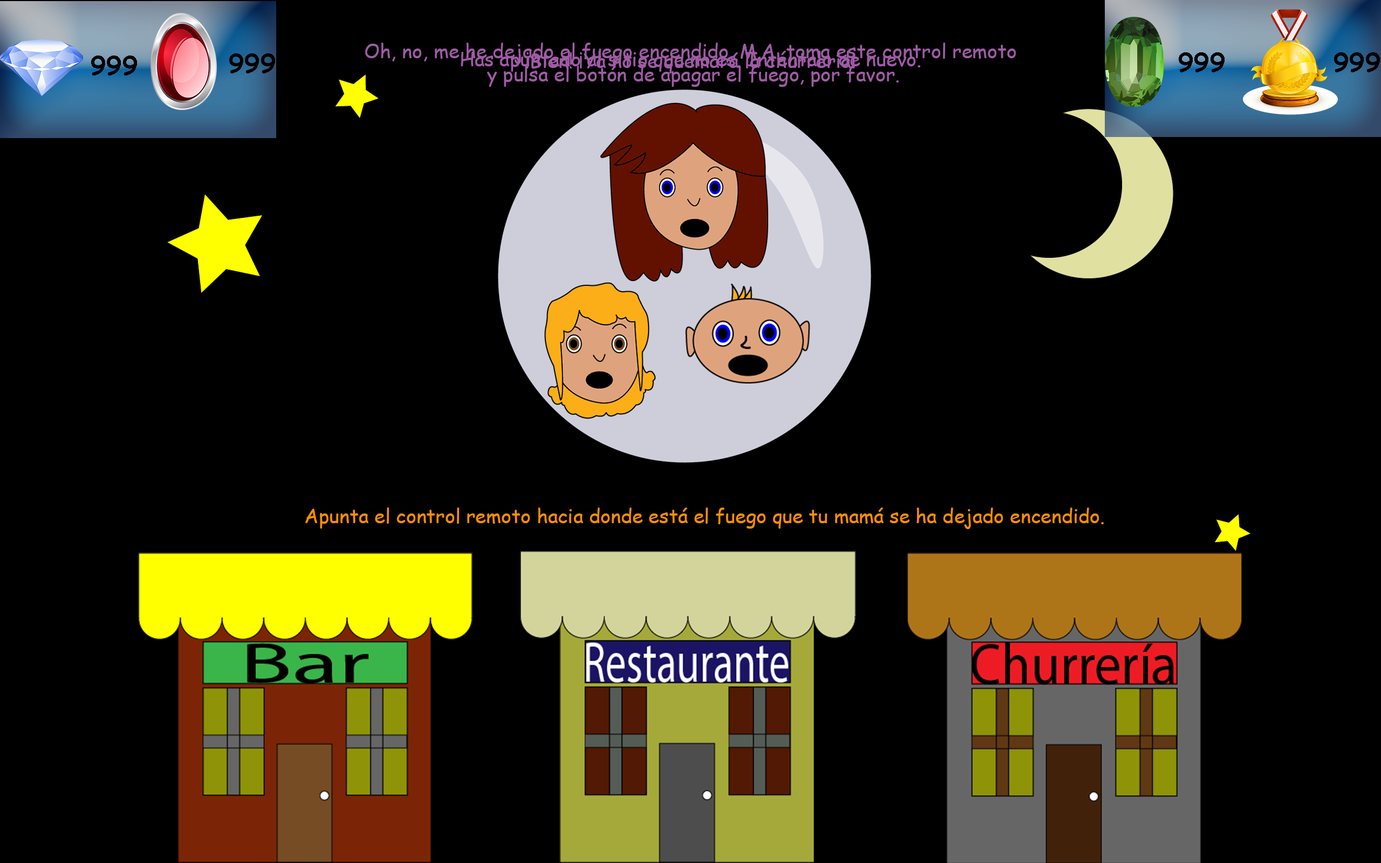
<style>
.page{position:relative;width:1381px;height:863px;background:#000000}
.page>*{position:absolute;margin:0}
.t1{font:25.9px "ComicSansMS-Bold";color:#010101}
.t2{font:19.4px "ComicSansMS";color:#9f5ca5}
.t3{font:25.9px "ComicSansMS-Bold";color:#000000}
.t4{font:19.4px "ComicSansMS";color:#ff9000}
</style>
<div class="page">
<p class="t1" style="left:229px;top:53px;width:46px;height:20px">999</p>
<p class="t2" style="left:365px;top:43px;width:651px;height:44px;text-align:center">Oh, no, me he dejado el fuego encendido. M.A. toma este control remoto<br> y pulsa el botón de apagar el fuego, por favor.</p>
<p class="t2" style="left:461px;top:51px;width:459px;height:21px">Has apuntado al sitio que no es. Inténtalo de nuevo.</p>
<p class="t2" style="left:527px;top:52px;width:328px;height:21px">¡Bien! ¡Ya no se quemará la churrería!</p>
<p class="t1" style="left:1179px;top:52px;width:46px;height:20px">999</p>
<p class="t3" style="left:1334px;top:52px;width:46px;height:20px">999</p>
<p class="t3" style="left:91px;top:56px;width:46px;height:20px">999</p>
<p class="t4" style="left:305px;top:508px;width:799px;height:21px">Apunta el control remoto hacia donde está el fuego que tu mamá se ha dejado encendido.</p>
</div>
